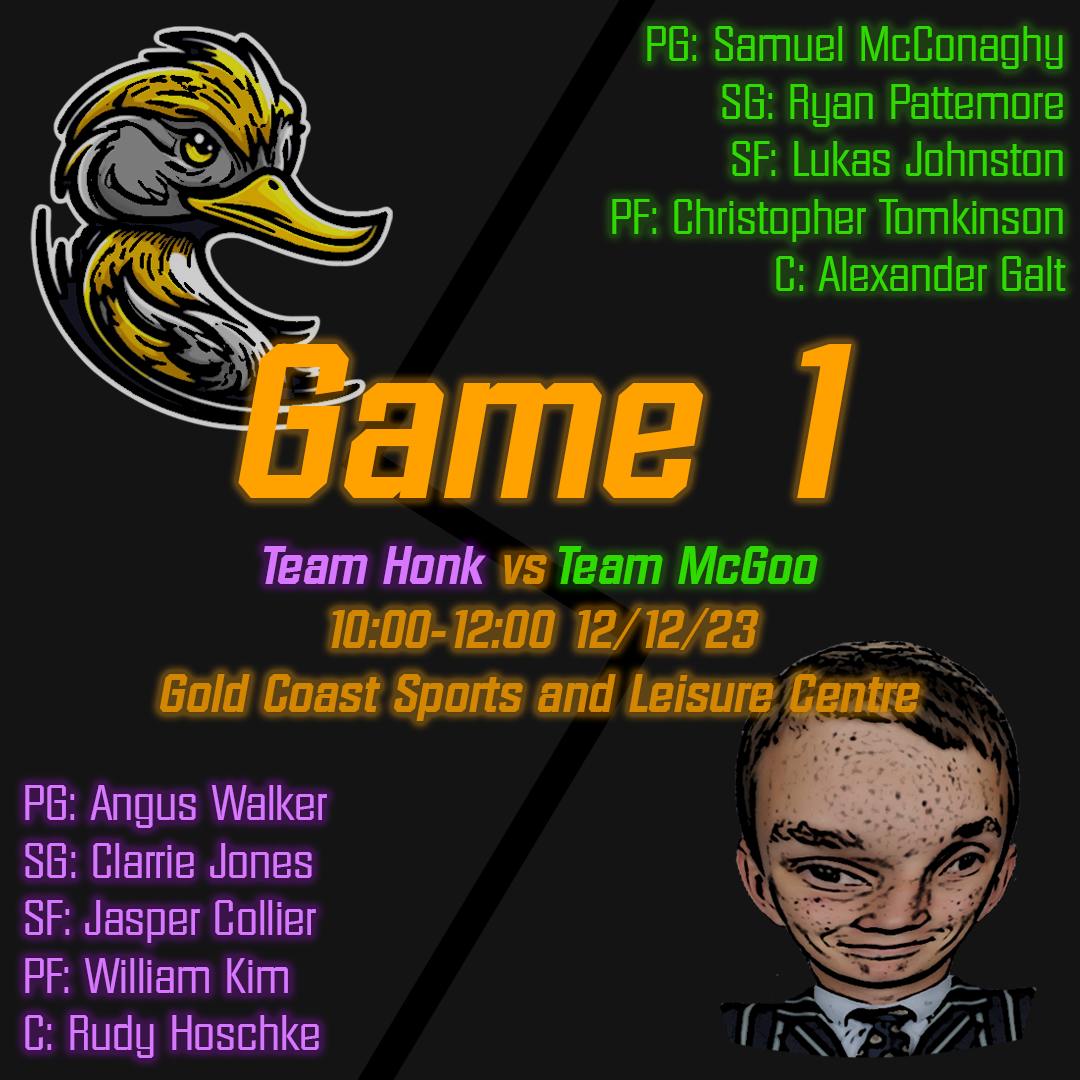
<style>
.page{position:relative;width:1080px;height:1080px;background:#141414}
.page>*{position:absolute;margin:0}
.t1{font:48px "Diamante-Serial-Regular";color:#2eda00}
.t2{font:213.3px "Diamante-Serial-BoldItalic";color:#ffa200}
.t3{font:53.3px "Diamante-Serial-BoldItalic";color:#d38600}
.t4{font:53.3px "Diamante-Serial-BoldItalic";color:#d777ff}
.t5{font:53.3px "Diamante-Serial-BoldItalic";color:#2eda00}
.t6{font:48px "Diamante-Serial-Regular";color:#d777ff}
</style>
<div class="page">
<p class="t1" style="left:612px;top:26px;width:454px;height:265px;text-align:right">PG: Samuel McConaghy<br>SG: Ryan Pattemore<br>SF: Lukas Johnston<br>PF: Christopher Tomkinson<br>C: Alexander Galt</p>
<p class="t2" style="left:238px;top:344px;width:614px;height:154px">Game 1</p>
<p class="t3" style="left:159px;top:555px;width:761px;height:166px;text-align:center">vs  <br>10:00-12:00 12/12/23<br>Gold Coast Sports and Leisure Centre</p>
<p class="t4" style="left:263px;top:546px;width:223px;height:38px">Team Honk</p>
<p class="t5" style="left:558px;top:546px;width:260px;height:38px">Team McGoo</p>
<p class="t6" style="left:25px;top:785px;width:302px;height:273px">PG: Angus Walker<br>SG: Clarrie Jones<br>SF: Jasper Collier<br>PF: William Kim<br>C: Rudy Hoschke</p>
</div>
